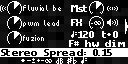
<style>
.page{position:relative;width:128px;height:64px;background:#ffffff}
.page>*{position:absolute;margin:0}
.t1{font:15px "Eighties";color:#ffffff}
.t2{font:15px "MatchupPro";color:#ffffff}
.t3{font:15px "MatchupPro";color:#000000}
</style>
<div class="page">
<p class="t1" style="left:23px;top:5px;width:38px;height:6px">Fluvial be</p>
<p class="t2" style="left:71px;top:5px;width:16px;height:7px">Mst</p>
<p class="t1" style="left:23px;top:20px;width:36px;height:7px">pwm lead</p>
<p class="t2" style="left:71px;top:19px;width:11px;height:7px">FX</p>
<p class="t1" style="left:23px;top:35px;width:21px;height:6px">fuzion</p>
<p class="t2" style="left:69px;top:40px;width:56px;height:7px">F# hw dim</p>
<p class="t2" style="left:78px;top:31px;width:16px;height:7px">120</p>
<p class="t2" style="left:102px;top:31px;width:16px;height:7px">t+0</p>
<p class="t3" style="left:1px;top:49px;width:111px;height:8px">Stereo Spread: 0.15</p>
<p class="t2" style="left:21px;top:59px;width:10px;height:3px">+-</p>
</div>
